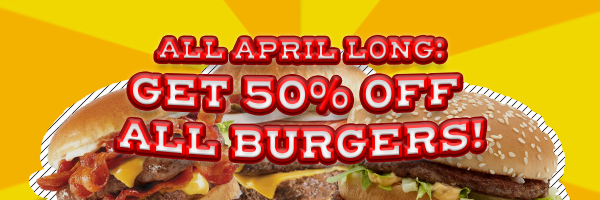
<style>
.page{position:relative;width:600px;height:200px}
.page>*{position:absolute;margin:0}
.t1{font:37.5px "HendersonSlabBasicBlack"}
.t2{font:25px "HendersonSlabBasicBlack"}
</style>
<div class="page">
<p class="t1" style="left:118px;top:39px;width:365px;height:122px;text-align:center"><span class="t2">ALL APRIL LONG:<br></span>GET 50% OFF <br>ALL BURGERS!</p>
</div>
